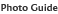
<style>
.page{position:relative;width:58px;height:14px;background:#ffffff}
.page>*{position:absolute;margin:0}
.t1{font:10.4px "AmiraParadiso";color:#333333}
</style>
<div class="page">
<p class="t1" style="left:1px;top:4px;width:57px;height:7px">Photo Guide</p>
</div>
